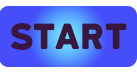
<style>
.page{position:relative;width:137px;height:77px;background:#ffffff}
.page>*{position:absolute;margin:0}
.t1{font:34.5px "KatahdinRound-Regular";color:#371640}
</style>
<div class="page">
<p class="t1" style="left:11px;top:23px;width:116px;height:27px">start</p>
</div>
